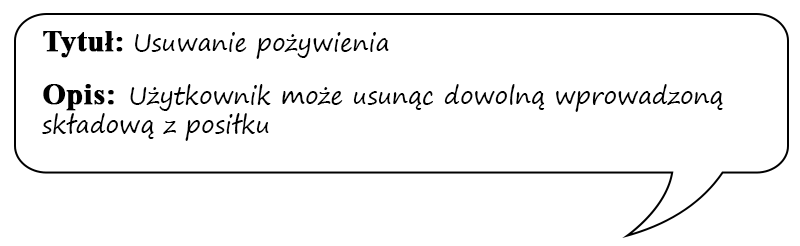
<style>
.page{position:relative;width:800px;height:246px;background:#ffffff}
.page>*{position:absolute;margin:0}
.t1{font:24px "SegoePrint";color:#000000}
.t2{font:30px "TimesNewRomanPS-BoldMT";color:#000000;font-weight:bold}
</style>
<div class="page">
<p class="t1" style="left:42px;top:31px;width:681px;height:110px"><span class="t2">Tytuł: </span>Usuwanie pożywienia<br><br><span class="t2">Opis:  </span>Użytkownik może usunąc dowolną wprowadzoną składową z posiłku</p>
</div>
